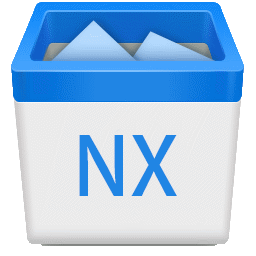
<style>
.page{position:relative;width:256px;height:256px;background:#ffffff}
.page>*{position:absolute;margin:0}
.t1{font:80px "AdobeHeitiStd-Regular";color:#2085e4}
</style>
<div class="page">
<p class="t1" style="left:79px;top:135px;width:98px;height:61px">NX</p>
</div>
